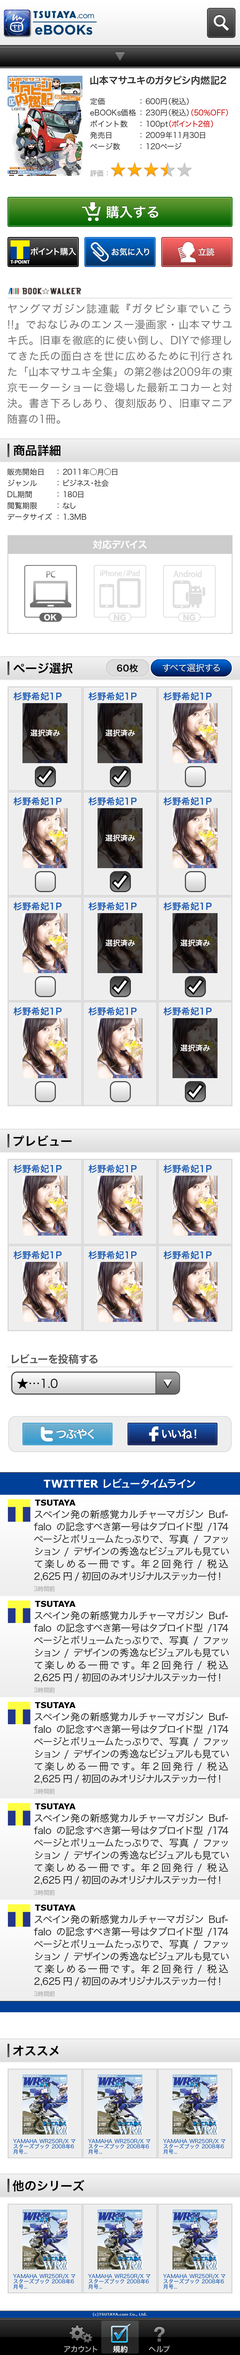
<style>
.page{position:relative;width:240px;height:2355px;background:#ffffff}
.page>*{position:absolute;margin:0}
.t1{font:9.8px "HiraKakuPro-W6";color:#707070}
.t2{font:9.8px "HiraKakuPro-W6";color:#333333}
.t3{font:7.5px/11.2px "HiraKakuPro-W3";color:#333333}
.t4{font:7.5px/11.2px "HiraKakuPro-W3";color:#cc0000}
.t5{font:6.7px "HiraKakuProN-W3";color:#999999}
.t6{font:13.5px "HiraKakuPro-W6";color:#ffffff}
.t7{font:8.2px "HiraKakuPro-W6";color:#ffffff}
.t8{font:10.5px/15.7px "HiraKakuPro-W3";color:#666666}
.t9{font:12px "HiraKakuPro-W6";color:#000000}
.t10{font:9.7px "HiraKakuProN-W6";color:#ffffff}
.t11{font:7.5px "HiraKakuStd-W8";color:#ffffff}
.t12{font:7.5px "HiraKakuStd-W8";color:#dddddd}
.t13{font:9px "HiraKakuPro-W6";color:#000000}
.t14{font:9px "HiraKakuPro-W3";color:#ffffff}
.t15{font:9px "HiraKakuPro-W6";color:#1858b2}
.t16{font:7.5px "HiraKakuPro-W6";color:#ffffff}
.t17{font:10.5px "HiraKakuPro-W6";color:#555555}
.t18{font:11.8px "HiraKakuPro-W3";letter-spacing:-0.01em;color:#000000}
.t19{font:11.2px "HiraKakuPro-W6";letter-spacing:-0.05em;color:#ffffff}
.t20{font:10.5px "HiraKakuPro-W6";color:#ffffff}
.t21{font:10.5px "Verdana-Bold";color:#ffffff}
.t22{font:8.2px "Verdana-Bold";color:#000000}
.t23{font:9.8px/12.4px "HiraKakuPro-W3";color:#222222}
.t24{font:6px "HiraKakuPro-W3";color:#aaaaaa}
.t25{font:5.2px/5.2px "HiraKakuPro-W3";color:#1858b2}
.t26{font:3.8px "Verdana-Bold";color:#cccccc}
.t27{font:7.5px "HiraKakuPro-W6";color:#a8a8a8}
</style>
<div class="page">
<p class="t1" style="left:116px;top:53px;width:8px;height:8px">▼</p>
<p class="t2" style="left:90px;top:75px;width:136px;height:10px">山本マサユキのガタピシ内燃記2</p>
<p class="t3" style="left:90px;top:98px;width:46px;height:52px;text-align:justify">定価<br>eBOOKs価格<br>ポイント数<br>発売日<br>ページ数</p>
<p class="t3" style="left:140px;top:98px;width:88px;height:52px;text-align:justify">： 600円（税込） <br>： 230円（税込）<span class="t4">（50％OFF） <br></span>： 100pt<span class="t4">（ポイント2倍）<br></span>： 2009年11月30日<br>： 120ページ</p>
<p class="t5" style="left:90px;top:170px;width:18px;height:7px">評価 ：</p>
<p class="t6" style="left:106px;top:206px;width:52px;height:12px">購入する</p>
<p class="t7" style="left:30px;top:247px;width:46px;height:8px">ポイント購入</p>
<p class="t7" style="left:111px;top:248px;width:38px;height:8px">お気に入り</p>
<p class="t7" style="left:198px;top:248px;width:16px;height:8px">立読</p>
<p class="t8" style="left:8px;top:303px;width:224px;height:121px;text-align:justify">ヤングマガジン誌連載『ガタピシ車でいこう!!』でおなじみのエンスー漫画家・山本マサユキ氏。旧車を徹底的に使い倒し、DIYで修理してきた氏の面白さを世に広めるために刊行された「山本マサユキ全集」の第2巻は2009年の東京モーターショーに登場した最新エコカーと対決。書き下ろしあり、復刻版あり、旧車マニア随喜の1冊。</p>
<p class="t9" style="left:14px;top:444px;width:47px;height:12px">商品詳細</p>
<p class="t3" style="left:7px;top:468px;width:45px;height:52px;text-align:justify">販売開始日<br>ジャンル<br>DL期間<br>閲覧期限<br>データサイズ</p>
<p class="t3" style="left:57px;top:468px;width:60px;height:52px;text-align:justify">： 2011年○月○日<br>： ビジネス・社会<br>： 180日<br>： なし<br>： 1.3MB</p>
<p class="t10" style="left:93px;top:540px;width:54px;height:9px">対応デバイス</p>
<p class="t11" style="left:44px;top:614px;width:13px;height:7px">OK</p>
<p class="t12" style="left:114px;top:614px;width:12px;height:7px">NG</p>
<p class="t12" style="left:183px;top:614px;width:12px;height:7px">NG</p>
<p class="t9" style="left:14px;top:663px;width:59px;height:11px">ページ選択</p>
<p class="t13" style="left:117px;top:664px;width:21px;height:8px">60枚</p>
<p class="t14" style="left:162px;top:664px;width:58px;height:8px">すべて選択する</p>
<p class="t15" style="left:14px;top:692px;width:48px;height:8px">杉野希妃1P</p>
<p class="t15" style="left:88px;top:692px;width:49px;height:8px">杉野希妃1P</p>
<p class="t15" style="left:164px;top:692px;width:48px;height:8px">杉野希妃1P</p>
<p class="t16" style="left:30px;top:729px;width:30px;height:7px">選択済み</p>
<p class="t16" style="left:105px;top:729px;width:30px;height:7px">選択済み</p>
<p class="t15" style="left:14px;top:797px;width:48px;height:9px">杉野希妃1P</p>
<p class="t15" style="left:88px;top:797px;width:49px;height:9px">杉野希妃1P</p>
<p class="t15" style="left:164px;top:797px;width:48px;height:9px">杉野希妃1P</p>
<p class="t16" style="left:105px;top:834px;width:30px;height:8px">選択済み</p>
<p class="t15" style="left:14px;top:902px;width:48px;height:8px">杉野希妃1P</p>
<p class="t15" style="left:88px;top:902px;width:49px;height:8px">杉野希妃1P</p>
<p class="t15" style="left:164px;top:902px;width:48px;height:8px">杉野希妃1P</p>
<p class="t16" style="left:105px;top:939px;width:30px;height:7px">選択済み</p>
<p class="t16" style="left:180px;top:939px;width:30px;height:7px">選択済み</p>
<p class="t15" style="left:14px;top:1007px;width:48px;height:9px">杉野希妃1P</p>
<p class="t15" style="left:88px;top:1007px;width:49px;height:9px">杉野希妃1P</p>
<p class="t15" style="left:164px;top:1007px;width:48px;height:9px">杉野希妃1P</p>
<p class="t16" style="left:180px;top:1044px;width:30px;height:8px">選択済み</p>
<p class="t9" style="left:14px;top:1135px;width:58px;height:11px">プレビュー</p>
<p class="t15" style="left:14px;top:1164px;width:48px;height:9px">杉野希妃1P</p>
<p class="t15" style="left:88px;top:1164px;width:49px;height:9px">杉野希妃1P</p>
<p class="t15" style="left:164px;top:1164px;width:48px;height:9px">杉野希妃1P</p>
<p class="t15" style="left:14px;top:1251px;width:48px;height:8px">杉野希妃1P</p>
<p class="t15" style="left:88px;top:1251px;width:49px;height:8px">杉野希妃1P</p>
<p class="t15" style="left:164px;top:1251px;width:48px;height:8px">杉野希妃1P</p>
<p class="t17" style="left:12px;top:1354px;width:86px;height:10px">レビューを投稿する</p>
<p class="t18" style="left:17px;top:1378px;width:41px;height:11px">★…1.0</p>
<p class="t19" style="left:56px;top:1429px;width:38px;height:10px">つぶやく</p>
<p class="t19" style="left:162px;top:1429px;width:34px;height:10px">いいね！</p>
<p class="t20" style="left:44px;top:1478px;width:151px;height:10px"><span class="t21">TWITTER </span>レビュータイムライン</p>
<p class="t22" style="left:35px;top:1500px;width:41px;height:6px">TSUTAYA</p>
<p class="t23" style="left:34px;top:1509px;width:195px;height:72px;text-align:justify">スペイン発の新感覚カルチャーマガジンBuffaloの記念すべき第一号はタブロイド型/174ページとボリュームたっぷりで、写真/ファッション/デザインの秀逸なビジュアルも見ていて楽しめる一冊です。年２回発行/税込2,625円/初回のみオリジナルステッカー付！</p>
<p class="t24" style="left:34px;top:1586px;width:21px;height:6px">3時間前</p>
<p class="t22" style="left:35px;top:1601px;width:41px;height:6px">TSUTAYA</p>
<p class="t23" style="left:34px;top:1611px;width:195px;height:72px;text-align:justify">スペイン発の新感覚カルチャーマガジンBuffaloの記念すべき第一号はタブロイド型/174ページとボリュームたっぷりで、写真/ファッション/デザインの秀逸なビジュアルも見ていて楽しめる一冊です。年２回発行/税込2,625円/初回のみオリジナルステッカー付！</p>
<p class="t24" style="left:34px;top:1687px;width:21px;height:6px">3時間前</p>
<p class="t22" style="left:35px;top:1702px;width:41px;height:6px">TSUTAYA</p>
<p class="t23" style="left:34px;top:1712px;width:195px;height:72px;text-align:justify">スペイン発の新感覚カルチャーマガジンBuffaloの記念すべき第一号はタブロイド型/174ページとボリュームたっぷりで、写真/ファッション/デザインの秀逸なビジュアルも見ていて楽しめる一冊です。年２回発行/税込2,625円/初回のみオリジナルステッカー付！</p>
<p class="t24" style="left:34px;top:1788px;width:21px;height:6px">3時間前</p>
<p class="t22" style="left:35px;top:1803px;width:41px;height:6px">TSUTAYA</p>
<p class="t23" style="left:34px;top:1813px;width:195px;height:72px;text-align:justify">スペイン発の新感覚カルチャーマガジンBuffaloの記念すべき第一号はタブロイド型/174ページとボリュームたっぷりで、写真/ファッション/デザインの秀逸なビジュアルも見ていて楽しめる一冊です。年２回発行/税込2,625円/初回のみオリジナルステッカー付！</p>
<p class="t24" style="left:34px;top:1890px;width:21px;height:6px">3時間前</p>
<p class="t22" style="left:35px;top:1905px;width:41px;height:6px">TSUTAYA</p>
<p class="t23" style="left:34px;top:1914px;width:195px;height:72px;text-align:justify">スペイン発の新感覚カルチャーマガジンBuffaloの記念すべき第一号はタブロイド型/174ページとボリュームたっぷりで、写真/ファッション/デザインの秀逸なビジュアルも見ていて楽しめる一冊です。年２回発行/税込2,625円/初回のみオリジナルステッカー付！</p>
<p class="t24" style="left:34px;top:1991px;width:21px;height:6px">3時間前</p>
<p class="t9" style="left:13px;top:2046px;width:46px;height:10px">オススメ</p>
<p class="t25" style="left:13px;top:2139px;width:62px;height:15px">YAMAHA WR250R/X マスターズブック 2008年6月号...</p>
<p class="t25" style="left:88px;top:2139px;width:62px;height:15px">YAMAHA WR250R/X マスターズブック 2008年6月号...</p>
<p class="t25" style="left:163px;top:2139px;width:62px;height:15px">YAMAHA WR250R/X マスターズブック 2008年6月号...</p>
<p class="t9" style="left:12px;top:2180px;width:72px;height:12px">他のシリーズ</p>
<p class="t25" style="left:13px;top:2274px;width:62px;height:15px">YAMAHA WR250R/X マスターズブック 2008年6月号...</p>
<p class="t25" style="left:88px;top:2274px;width:62px;height:15px">YAMAHA WR250R/X マスターズブック 2008年6月号...</p>
<p class="t25" style="left:163px;top:2274px;width:62px;height:15px">YAMAHA WR250R/X マスターズブック 2008年6月号...</p>
<p class="t26" style="left:93px;top:2313px;width:54px;height:3px">(c)TSUTAYA.com Co., Ltd.</p>
<p class="t27" style="left:64px;top:2346px;width:34px;height:6px">アカウント</p>
<p class="t16" style="left:113px;top:2346px;width:15px;height:7px">規約</p>
<p class="t27" style="left:148px;top:2346px;width:22px;height:7px">ヘルプ</p>
</div>
